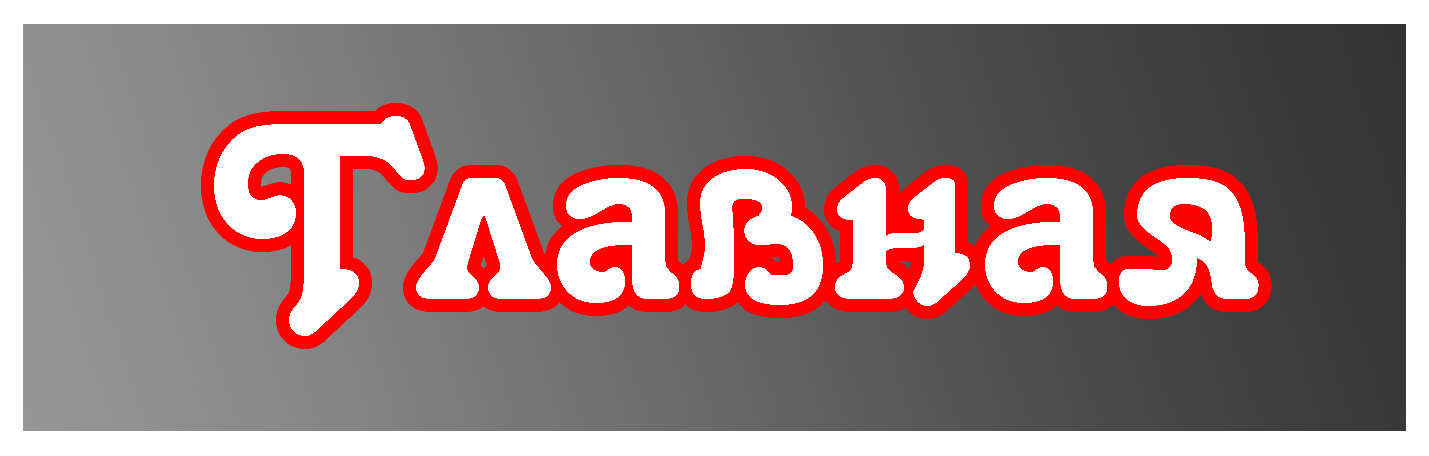
<style>
.page{position:relative;width:1429px;height:456px;background:#ffffff}
.page>*{position:absolute;margin:0}
.t1{font:325.9px "TangoDi";color:#ffffff}
</style>
<div class="page">
<p class="t1" style="left:214px;top:116px;width:1045px;height:220px">Главная</p>
</div>
